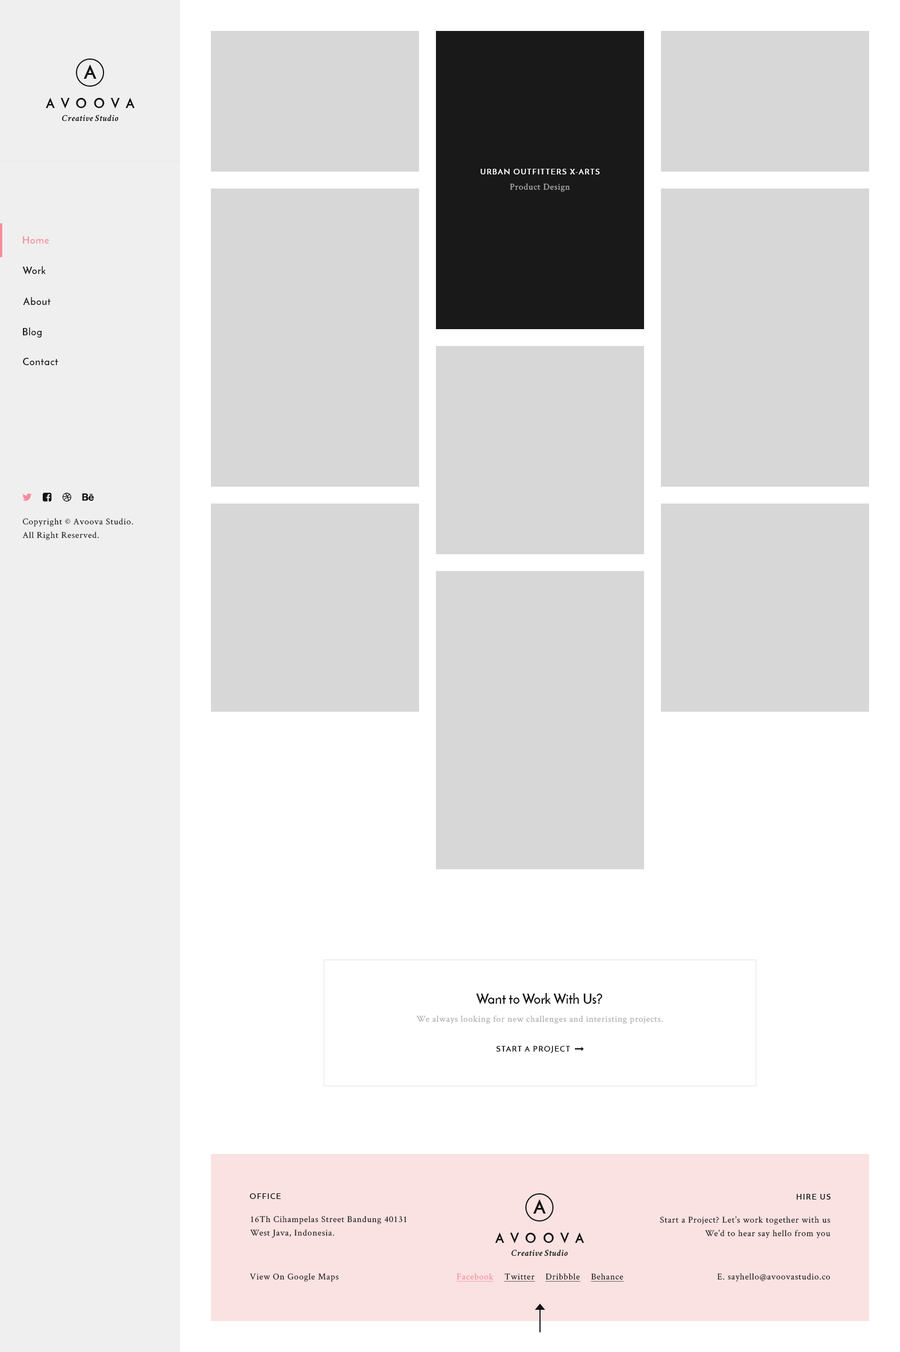
<style>
.page{position:relative;width:900px;height:1352px;background:#ffffff}
.page>*{position:absolute;margin:0}
.t1{font:7.9px "JosefinSans-SemiBold";letter-spacing:0.1em;color:#ffffff;text-transform:uppercase}
.t2{font:9px "CrimsonText-Roman";letter-spacing:0.05em;color:#ababab}
.t3{font:10.1px "JosefinSans-SemiBold";letter-spacing:0.05em;color:#f68c9d}
.t4{font:10.1px "JosefinSans-SemiBold";letter-spacing:0.05em;color:#121212}
.t5{font:9px/13.5px "CrimsonText-Roman";letter-spacing:0.05em;color:#121212}
.t6{font:13.5px "JosefinSans-SemiBold";color:#121212}
.t7{font:7.9px "JosefinSans-SemiBold";letter-spacing:0.1em;color:#121212;text-transform:uppercase}
.t8{font:9px "CrimsonText-Roman";letter-spacing:0.05em;color:#121212}
.t9{font:9px "CrimsonText-Roman";letter-spacing:0.05em;color:#f68c9d;text-decoration:underline}
.t10{font:9px "CrimsonText-Roman";letter-spacing:0.05em;color:#121212;text-decoration:underline}
</style>
<div class="page">
<p class="t1" style="left:480px;top:168px;width:120px;height:7px">Urban Outfitters X-Arts</p>
<p class="t2" style="left:510px;top:183px;width:60px;height:9px">Product Design</p>
<p class="t3" style="left:22px;top:236px;width:28px;height:8px">Home</p>
<p class="t4" style="left:22px;top:266px;width:24px;height:8px">Work</p>
<p class="t4" style="left:23px;top:297px;width:28px;height:8px">About</p>
<p class="t4" style="left:22px;top:327px;width:20px;height:11px">Blog</p>
<p class="t4" style="left:22px;top:358px;width:36px;height:7px">Contact</p>
<p class="t5" style="left:22px;top:518px;width:111px;height:22px">Copyright © Avoova Studio.<br>All Right Reserved.</p>
<p class="t6" style="left:476px;top:993px;width:126px;height:11px">Want to Work With Us?</p>
<p class="t2" style="left:416px;top:1015px;width:247px;height:9px">We always looking for new challenges and interisting projects.</p>
<p class="t7" style="left:496px;top:1046px;width:74px;height:6px">Start A Project</p>
<p class="t7" style="left:250px;top:1193px;width:31px;height:6px">Office</p>
<p class="t7" style="left:796px;top:1194px;width:35px;height:5px">Hire Us</p>
<p class="t5" style="left:250px;top:1216px;width:157px;height:22px">16Th Cihampelas Street Bandung 40131<br>West Java, Indonesia.</p>
<p class="t5" style="left:660px;top:1216px;width:170px;height:22px;text-align:right">Start a Project? Let’s work together with us<br>We’d to hear say hello from you</p>
<p class="t8" style="left:250px;top:1273px;width:89px;height:8px">View On Google Maps</p>
<p class="t9" style="left:456px;top:1273px;width:38px;height:8px">Facebook</p>
<p class="t10" style="left:504px;top:1273px;width:31px;height:8px">Twitter</p>
<p class="t10" style="left:545px;top:1273px;width:35px;height:8px">Dribbble</p>
<p class="t10" style="left:591px;top:1273px;width:33px;height:8px">Behance</p>
<p class="t8" style="left:717px;top:1273px;width:113px;height:8px">E. sayhello@avoovastudio.co</p>
</div>
